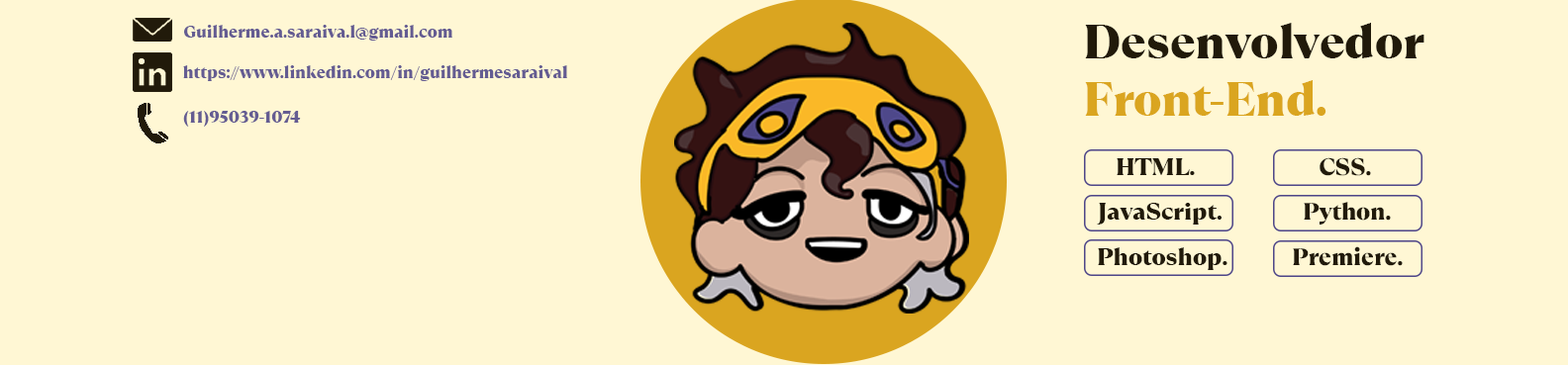
<style>
.page{position:relative;width:1568px;height:365px;background:#fff7d4}
.page>*{position:absolute;margin:0}
.t1{font:16.8px "TTRamillasTrl-Black";color:#645c92}
.t2{font:47.5px "TTRamillasTrl-Black";color:#211a0a}
.t3{font:47.5px "TTRamillasTrl-Black";color:#daa520}
.t4{font:17.8px "TTRamillasTrl-Black";color:#645c92}
.t5{font:23.8px "TTRamillasTrl-Black";color:#211a0a}
</style>
<div class="page">
<p class="t1" style="left:184px;top:25px;width:268px;height:16px">Guilherme.a.saraiva.l@gmail.com</p>
<p class="t2" style="left:1085px;top:23px;width:339px;height:93px">Desenvolvedor <span class="t3">Front-End.</span></p>
<p class="t1" style="left:183px;top:65px;width:384px;height:16px">https://www.linkedin.com/in/guilhermesaraiva<span class="t4">l</span></p>
<p class="t1" style="left:183px;top:111px;width:118px;height:16px">(11)95039-1074</p>
<p class="t5" style="left:1117px;top:158px;width:78px;height:17px">HTML.</p>
<p class="t5" style="left:1320px;top:157px;width:51px;height:19px">CSS.</p>
<p class="t5" style="left:1097px;top:203px;width:125px;height:22px">JavaScript.</p>
<p class="t5" style="left:1304px;top:202px;width:87px;height:23px">Python.</p>
<p class="t5" style="left:1098px;top:247px;width:129px;height:23px">Photoshop.</p>
<p class="t5" style="left:1293px;top:246px;width:110px;height:20px">Premiere.</p>
</div>
